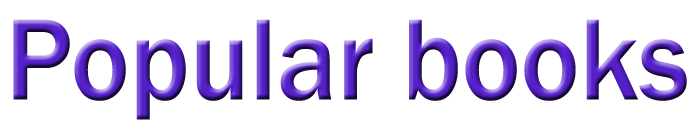
<style>
.page{position:relative;width:690px;height:136px;background:#ffffff}
.page>*{position:absolute;margin:0}
.t1{font:119.3px "FranklinGothic-Medium";scale:0.93 1}
</style>
<div class="page">
<p class="t1" style="left:13px;top:19px;width:674px;height:101px">Popular books</p>
</div>
